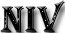
<style>
.page{position:relative;width:65px;height:33px;background:#ffffff}
.page>*{position:absolute;margin:0}
.t1{font:38px "Algerian";color:#000000;font-weight:bold}
</style>
<div class="page">
<p class="t1" style="left:0px;top:0px;width:65px;height:33px">NIV</p>
</div>
